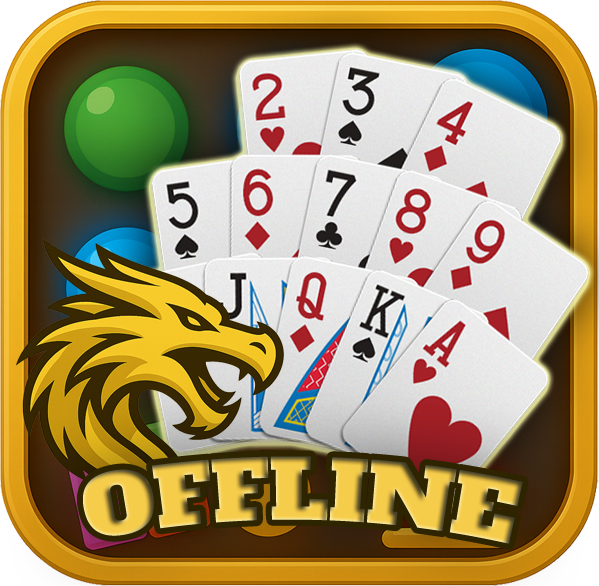
<style>
.page{position:relative;width:599px;height:586px}
.page>*{position:absolute;margin:0}
.t1{font:80px "AlfaSlabOne-Regular";color:#f6cc4b}
</style>
<div class="page">
<p class="t1" style="left:83px;top:456px;width:440px;height:88px;rotate:1deg">OFFLINE</p>
</div>
